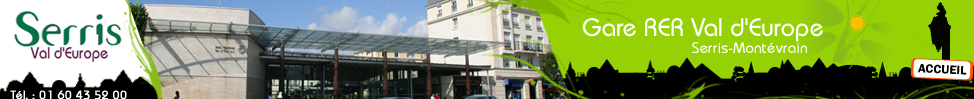
<style>
.page{position:relative;width:974px;height:99px}
.page>*{position:absolute;margin:0}
.t1{font:25px "DynameSSK";color:#ffffff}
.t2{font:15px "DynameSSK";color:#ffffff}
.t3{font:11.8px "DynameSSK";color:#ffffff;font-weight:bold}
</style>
<div class="page">
<p class="t1" style="left:582px;top:18px;width:241px;height:24px">Gare RER Val d'Europe</p>
<p class="t2" style="left:692px;top:42px;width:115px;height:11px">Serris-Montévrain</p>
<p class="t3" style="left:10px;top:90px;width:117px;height:9px">Tél. : 01 60 43 52 00</p>
</div>
